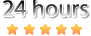
<style>
.page{position:relative;width:91px;height:36px;background:#ffffff}
.page>*{position:absolute;margin:0}
.t1{font:24px "MyriadPro-Regular"}
</style>
<div class="page">
<p class="t1" style="left:2px;top:0px;width:86px;height:17px">24 hours</p>
</div>
